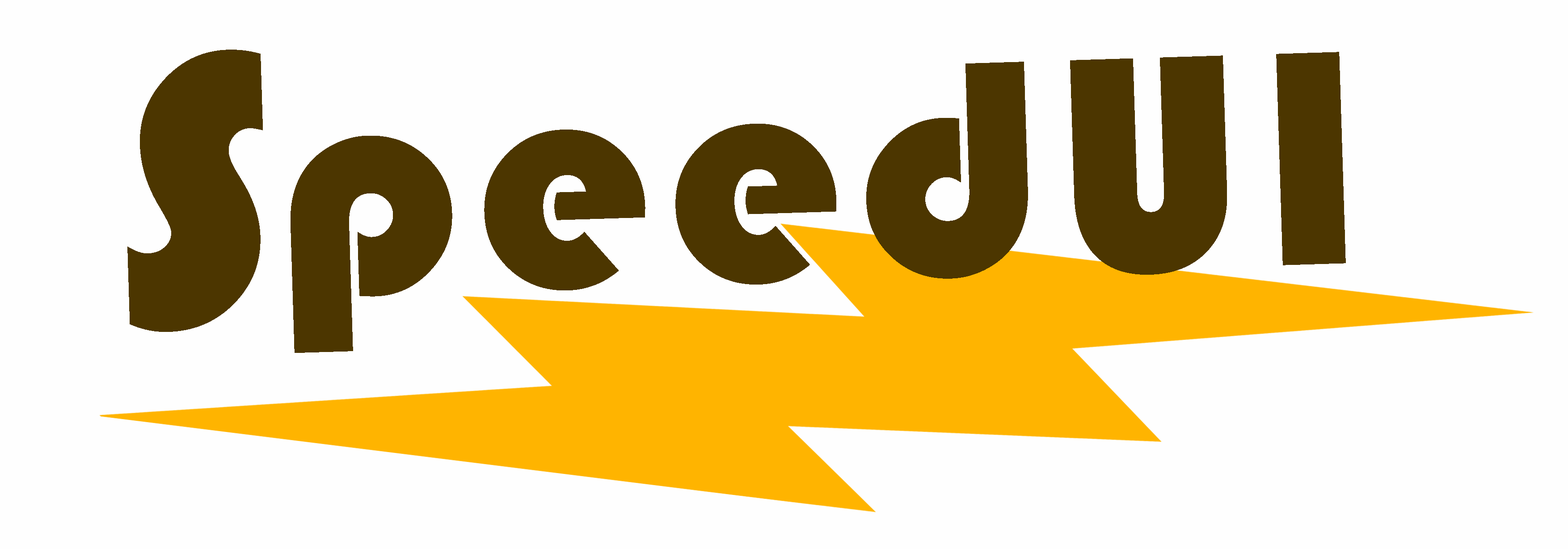
<style>
.page{position:relative;width:1568px;height:549px;background:#fefefe}
.page>*{position:absolute;margin:0}
.t1{font:400.4px "Bauhaus93";letter-spacing:0.05em;color:#4c3600}
.t2{font:316.6px "Bauhaus93";letter-spacing:0.05em;color:#4c3600}
</style>
<div class="page">
<p class="t1" style="left:127px;top:50px;width:136px;height:282px;rotate:-2deg">S</p>
<p class="t2" style="left:291px;top:52px;width:1055px;height:301px;rotate:-2deg">peedUI</p>
</div>
